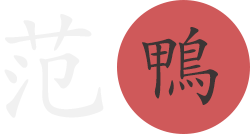
<style>
.page{position:relative;width:250px;height:134px;background:#ffffff}
.page>*{position:absolute;margin:0}
.t1{font:128px "AdobeKaitiStd-Regular";color:#f1f1f1}
.t2{font:89.3px "AdobeKaitiStd-Regular";color:#3c3535}
</style>
<div class="page">
<p class="t1" style="left:4px;top:14px;width:100px;height:104px">范</p>
<p class="t2" style="left:142px;top:27px;width:76px;height:78px">鴨</p>
</div>
